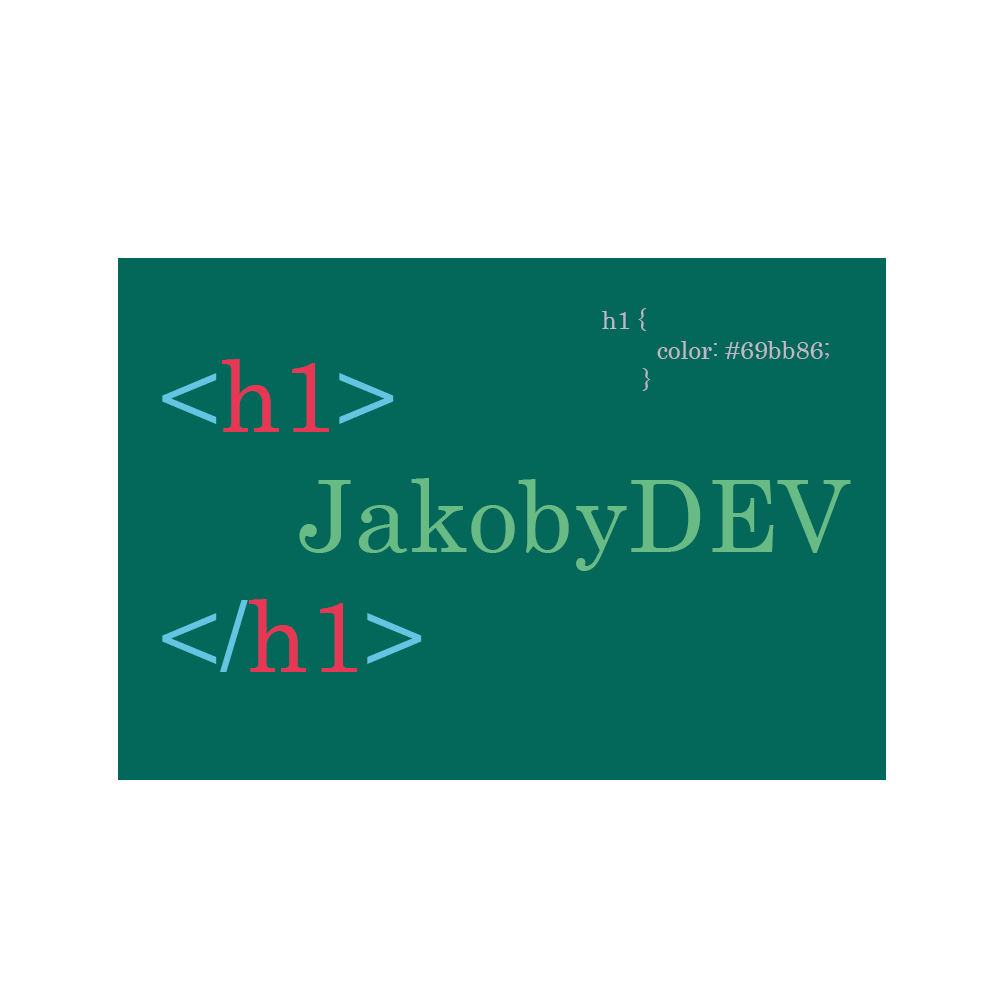
<style>
.page{position:relative;width:1000px;height:1000px;background:#ffffff}
.page>*{position:absolute;margin:0}
.t1{font:25px "Century";color:#bcb9c8}
.t2{font:100px "Century";color:#69bb86}
.t3{font:100px "Century";color:#63c5e2}
.t4{font:100px "Century";color:#e83755}
</style>
<div class="page">
<p class="t1" style="left:602px;top:308px;width:227px;height:83px">h1 {<br>        color: #69bb86;<br>      }</p>
<p class="t2" style="left:162px;top:359px;width:689px;height:313px"><span class="t3">&lt;</span><span class="t4">h1</span><span class="t3">&gt;<br>     </span>JakobyDEV<br><span class="t3">&lt;/</span><span class="t4">h1</span><span class="t3">&gt;</span></p>
</div>
